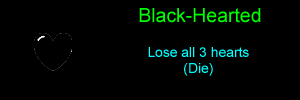
<style>
.page{position:relative;width:300px;height:100px;background:#000000}
.page>*{position:absolute;margin:0}
.t1{font:19.4px "ArialMT";color:#00ff00}
.t2{font:13.9px "ArialMT";color:#00ffff}
</style>
<div class="page">
<p class="t1" style="left:139px;top:8px;width:122px;height:15px">Black-Hearted</p>
<p class="t2" style="left:148px;top:47px;width:101px;height:29px;text-align:center">Lose all 3 hearts<br>(Die)</p>
</div>
